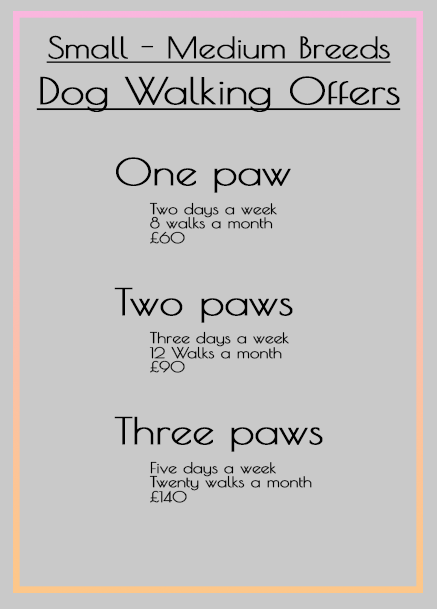
<style>
.page{position:relative;width:437px;height:609px;background:#c9c9c9}
.page>*{position:absolute;margin:0}
.t1{font:29px "PoiretOne-Regular";letter-spacing:-0.02em;color:#000000;font-weight:bold;text-decoration:underline;scale:1.19 1}
.t2{font:36.3px "PoiretOne-Regular";letter-spacing:-0.02em;color:#000000;font-weight:bold;text-decoration:underline;scale:1.19 1}
.t3{font:14.5px "PoiretOne-Regular";letter-spacing:-0.02em;color:#000000;font-weight:bold;scale:1.19 1}
.t4{font:36.3px "PoiretOne-Regular";letter-spacing:-0.02em;color:#000000;font-weight:bold;scale:1.19 1}
</style>
<div class="page">
<p class="t1" style="left:46px;top:35px;width:345px;height:28px">Small - Medium Breeds</p>
<p class="t2" style="left:36px;top:76px;width:365px;height:36px">Dog Walking Offers</p>
<p class="t3" style="left:114px;top:157px;width:209px;height:346px"><span class="t4">One paw<br></span><br> Two days a week <br> 8 walks a month<br> £60<br> <span class="t4"><br>Two paws<br></span> <br> Three days a week<br> 12 Walks a month<br> £90<br><span class="t4"><br>Three paws<br></span> <br> Five days a week<br> Twenty walks a month<br> £140</p>
</div>
